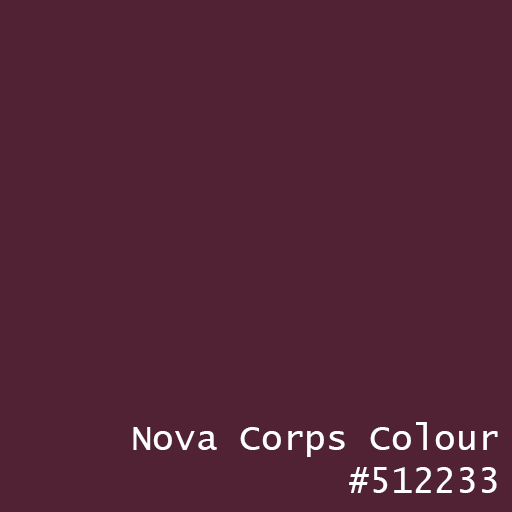
<style>
.page{position:relative;width:512px;height:512px;background:#512233}
.page>*{position:absolute;margin:0}
.t1{font:36px "LucidaConsole";color:#ffffff}
</style>
<div class="page">
<p class="t1" style="left:133px;top:422px;width:365px;height:71px;text-align:right">Nova Corps Colour<br>#512233</p>
</div>
